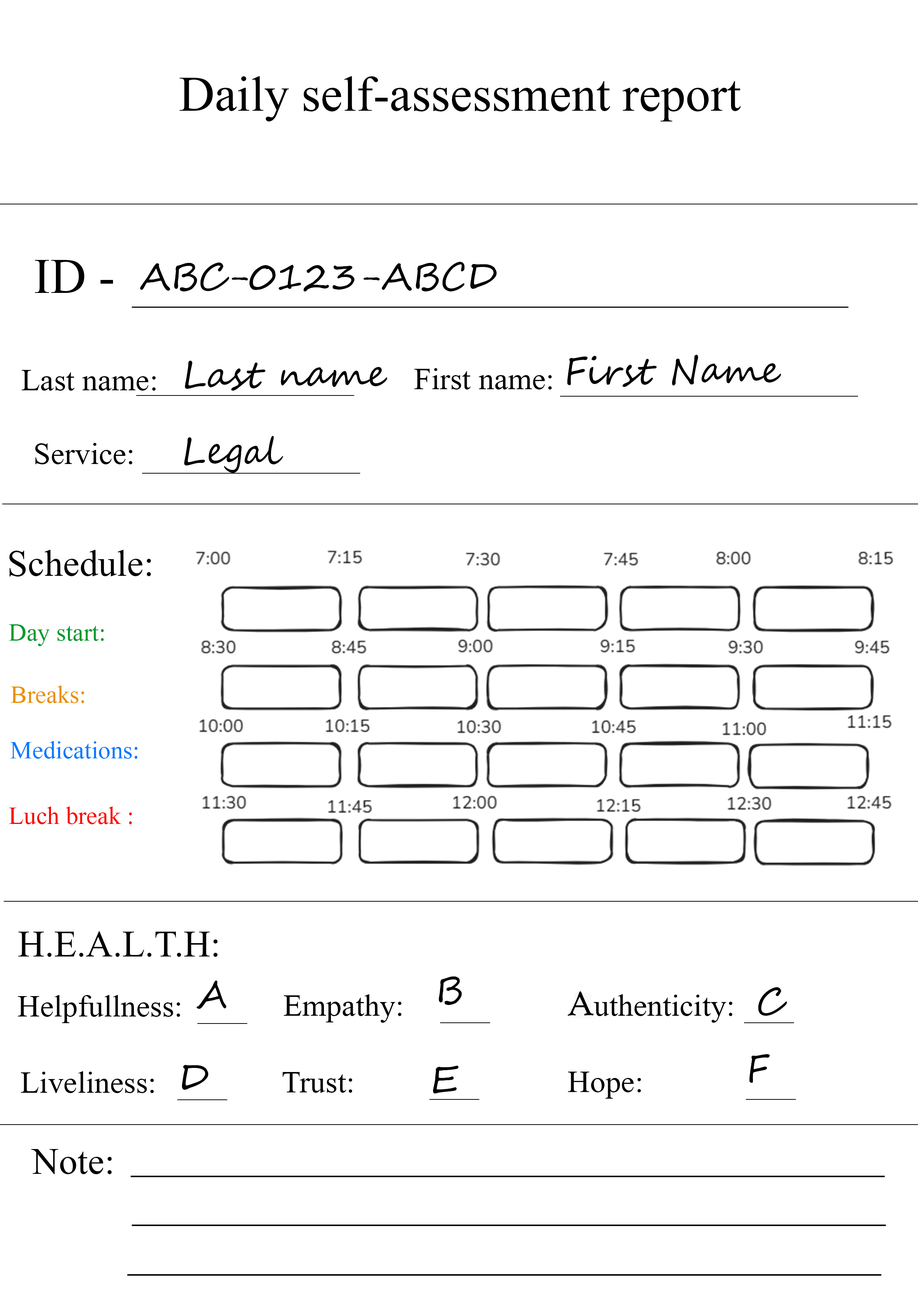
<style>
.page{position:relative;width:918px;height:1299px;background:#ffffff}
.page>*{position:absolute;margin:0}
.t1{font:74px "Microsoft-Himalaya";color:#000000}
.t2{font:37px "SegoeScript";color:#000000}
.t3{font:46.3px "Microsoft-Himalaya";color:#000000}
.t4{font:55.5px "Microsoft-Himalaya";color:#000000}
.t5{font:37px "Microsoft-Himalaya";color:#00982b}
.t6{font:37px "Microsoft-Himalaya";color:#ea8f00}
.t7{font:37px "Microsoft-Himalaya";color:#0078ff}
.t8{font:37px "Microsoft-Himalaya";color:#f90000}
.t9{font:37px "HighTowerText-Reg";color:#000000}
</style>
<div class="page">
<p class="t1" style="left:180px;top:76px;width:561px;height:45px">Daily self-assessment report</p>
<p class="t1" style="left:35px;top:260px;width:78px;height:33px">ID -</p>
<p class="t2" style="left:140px;top:262px;width:357px;height:29px">ABC-0123-ABCD</p>
<p class="t2" style="left:185px;top:361px;width:202px;height:30px">Last name</p>
<p class="t2" style="left:567px;top:355px;width:214px;height:32px">First Name</p>
<p class="t3" style="left:21px;top:370px;width:135px;height:21px">Last name:</p>
<p class="t3" style="left:414px;top:368px;width:138px;height:21px">First name:</p>
<p class="t2" style="left:184px;top:436px;width:99px;height:37px">Legal</p>
<p class="t3" style="left:35px;top:443px;width:98px;height:21px">Service:</p>
<p class="t4" style="left:9px;top:550px;width:142px;height:26px">Schedule:</p>
<p class="t5" style="left:9px;top:624px;width:95px;height:22px">Day start:</p>
<p class="t6" style="left:11px;top:685px;width:73px;height:18px">Breaks:</p>
<p class="t7" style="left:10px;top:741px;width:128px;height:18px">Medications:</p>
<p class="t8" style="left:9px;top:806px;width:123px;height:18px">Luch break :</p>
<p class="t4" style="left:18px;top:931px;width:200px;height:26px">H.E.A.L.T.H:</p>
<p class="t2" style="left:439px;top:976px;width:23px;height:29px">B</p>
<p class="t2" style="left:197px;top:980px;width:30px;height:29px">A</p>
<p class="t2" style="left:758px;top:987px;width:29px;height:29px">C</p>
<p class="t3" style="left:18px;top:995px;width:162px;height:28px">Helpfullness:</p>
<p class="t3" style="left:284px;top:994px;width:118px;height:29px">Empathy:</p>
<p class="t9" style="left:568px;top:991px;width:26px;height:25px">A</p>
<p class="t3" style="left:581px;top:994px;width:152px;height:29px">authenticity:</p>
<p class="t2" style="left:749px;top:1054px;width:21px;height:29px">F</p>
<p class="t3" style="left:21px;top:1071px;width:133px;height:22px">Liveliness:</p>
<p class="t2" style="left:182px;top:1065px;width:26px;height:25px">D</p>
<p class="t3" style="left:282px;top:1072px;width:70px;height:21px">Trust:</p>
<p class="t2" style="left:433px;top:1065px;width:26px;height:28px">E</p>
<p class="t3" style="left:568px;top:1071px;width:73px;height:27px">Hope:</p>
<p class="t4" style="left:31px;top:1149px;width:81px;height:25px">Note:</p>
</div>
